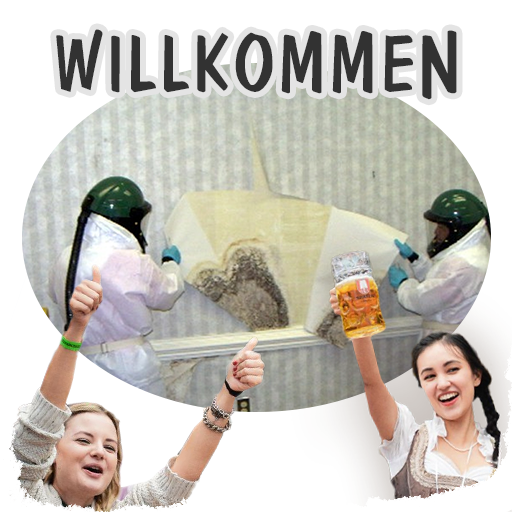
<style>
.page{position:relative;width:512px;height:512px;background:#ffffff}
.page>*{position:absolute;margin:0}
.t1{font:82px "Dominican";color:#323232;text-transform:uppercase}
</style>
<div class="page">
<p class="t1" style="left:56px;top:29px;width:401px;height:71px">willkommen</p>
</div>
